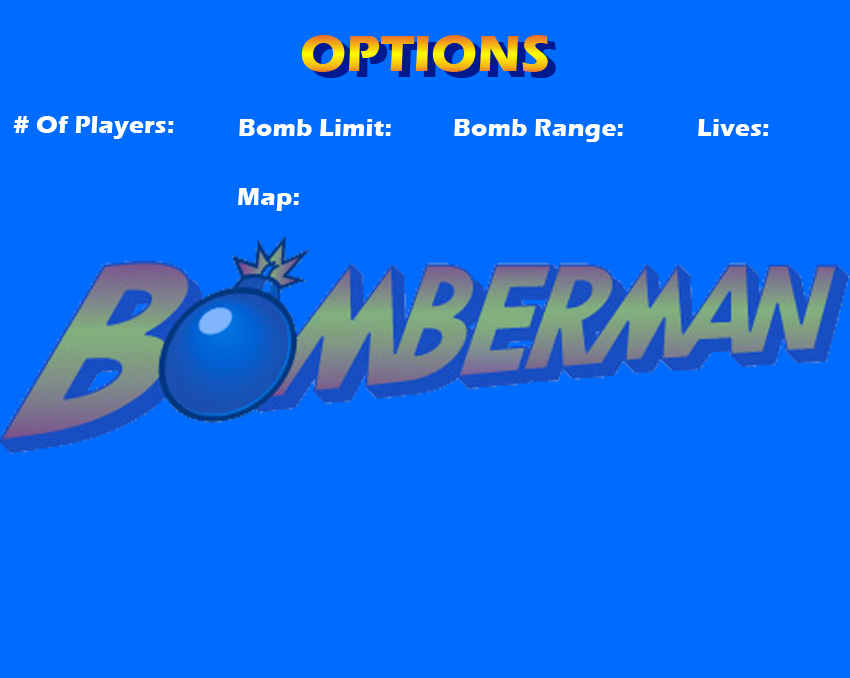
<style>
.page{position:relative;width:850px;height:678px;background:#006cff}
.page>*{position:absolute;margin:0}
.t1{font:52.9px "ErasITC-Bold"}
.t2{font:25.4px "ErasITC-Bold";color:#ffffff}
</style>
<div class="page">
<p class="t1" style="left:301px;top:35px;width:247px;height:37px">OPTIONS</p>
<p class="t2" style="left:13px;top:116px;width:161px;height:23px"># Of Players:</p>
<p class="t2" style="left:239px;top:119px;width:152px;height:17px">Bomb Limit:</p>
<p class="t2" style="left:454px;top:119px;width:169px;height:23px">Bomb Range:</p>
<p class="t2" style="left:698px;top:119px;width:71px;height:17px">Lives:</p>
<p class="t2" style="left:237px;top:188px;width:62px;height:23px">Map:</p>
</div>
